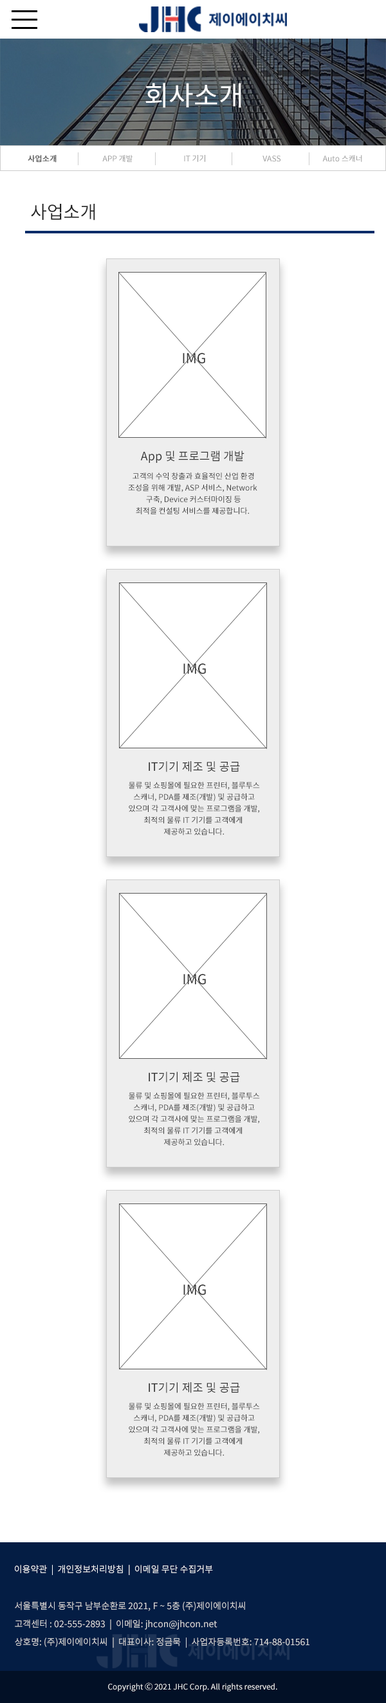
<style>
.page{position:relative;width:386px;height:1703px;background:#ffffff}
.page>*{position:absolute;margin:0}
.t1{font:27px "NotoSansKR-Regular";color:#ffffff}
.t2{font:7.7px "NotoSansKR-Regular";color:#595959;font-weight:bold}
.t3{font:7.7px "NotoSansKR-Regular";color:#959595}
.t4{font:18px "NotoSansKR-Regular";color:#242424}
.t5{font:13.7px "NotoSansKR-Regular";color:#333333}
.t6{font:11.6px "NotoSansKR-Regular";color:#333333}
.t7{font:7.7px/11.6px "NotoSansKR-Regular";color:#333333}
.t8{font:9px "NotoSansKR-Regular";color:#ffffff}
.t9{font:9px/18px "NotoSansKR-Regular";color:#dddddd}
.t10{font:7.7px "NotoSansKR-Regular";color:#ffffff}
</style>
<div class="page">
<p class="t1" style="left:145px;top:83px;width:96px;height:25px">회사소개</p>
<p class="t2" style="left:28px;top:155px;width:29px;height:8px">사업소개</p>
<p class="t3" style="left:102px;top:155px;width:30px;height:7px">APP 개발</p>
<p class="t3" style="left:184px;top:155px;width:21px;height:7px">IT 기기</p>
<p class="t3" style="left:262px;top:156px;width:18px;height:6px">VASS</p>
<p class="t3" style="left:322px;top:155px;width:40px;height:7px">Auto 스캐너</p>
<p class="t4" style="left:31px;top:204px;width:64px;height:17px">사업소개</p>
<p class="t5" style="left:183px;top:353px;width:22px;height:11px">IMG</p>
<p class="t6" style="left:140px;top:451px;width:104px;height:12px">App 및 프로그램 개발</p>
<p class="t7" style="left:128px;top:473px;width:129px;height:41px;text-align:center">고객의 수익 창출과 효율적인 산업 환경<br>조성을 위해 개발, ASP 서비스, Network <br>구축, Device 커스터마이징 등<br>최적을 컨설팅 서비스를 제공합니다.</p>
<p class="t5" style="left:183px;top:663px;width:23px;height:11px">IMG</p>
<p class="t6" style="left:148px;top:761px;width:92px;height:11px">IT기기 제조 및 공급</p>
<p class="t7" style="left:129px;top:782px;width:131px;height:53px;text-align:center">물류 및 쇼핑몰에 필요한 프린터, 블루투스<br>스캐너, PDA를 제조(개발) 및 공급하고<br>있으며 각 고객사에 맞는 프로그램을 개발,<br>최적의 물류 IT 기기를 고객에게 <br>제공하고 있습니다.</p>
<p class="t5" style="left:183px;top:974px;width:23px;height:11px">IMG</p>
<p class="t6" style="left:148px;top:1072px;width:92px;height:11px">IT기기 제조 및 공급</p>
<p class="t7" style="left:129px;top:1092px;width:131px;height:54px;text-align:center">물류 및 쇼핑몰에 필요한 프린터, 블루투스<br>스캐너, PDA를 제조(개발) 및 공급하고<br>있으며 각 고객사에 맞는 프로그램을 개발,<br>최적의 물류 IT 기기를 고객에게 <br>제공하고 있습니다.</p>
<p class="t5" style="left:183px;top:1284px;width:23px;height:11px">IMG</p>
<p class="t6" style="left:148px;top:1382px;width:92px;height:11px">IT기기 제조 및 공급</p>
<p class="t7" style="left:129px;top:1403px;width:131px;height:53px;text-align:center">물류 및 쇼핑몰에 필요한 프린터, 블루투스<br>스캐너, PDA를 제조(개발) 및 공급하고<br>있으며 각 고객사에 맞는 프로그램을 개발,<br>최적의 물류 IT 기기를 고객에게 <br>제공하고 있습니다.</p>
<p class="t8" style="left:15px;top:1565px;width:198px;height:10px">이용약관  |  개인정보처리방침  |  이메일 무단 수집거부</p>
<p class="t9" style="left:15px;top:1601px;width:294px;height:47px">서울특별시 동작구 남부순환로 2021, F ~ 5층 (주)제이에이치씨<br>고객센터 : 02-555-2893  |  이메일: jhcon@jhcon.net<br>상호명: (주)제이에이치씨  |  대표이사: 정금묵  |  사업자등록번호: 714-88-01561</p>
<p class="t10" style="left:108px;top:1682px;width:169px;height:9px">Copyright Ⓒ 2021 JHC Corp. All rights reserved.</p>
</div>
